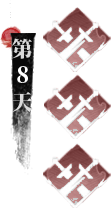
<style>
.page{position:relative;width:111px;height:208px;background:#ffffff}
.page>*{position:absolute;margin:0}
.t1{font:21.7px/26.7px "SourceHanSerifSC-Heavy";color:#dadada}
.t2{font:21.7px "SourceHanSerifSC-Heavy";color:#ffffff}
</style>
<div class="page">
<p class="t1" style="left:12px;top:38px;width:21px;height:74px">第 <br><br>天</p>
<p class="t2" style="left:17px;top:66px;width:11px;height:17px">8</p>
</div>
